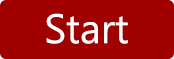
<style>
.page{position:relative;width:174px;height:59px;background:#a10000}
.page>*{position:absolute;margin:0}
.t1{font:38px "MicrosoftJhengHeiUIRegular";color:#ffffff}
</style>
<div class="page">
<p class="t1" style="left:46px;top:13px;width:82px;height:31px">Start</p>
</div>
